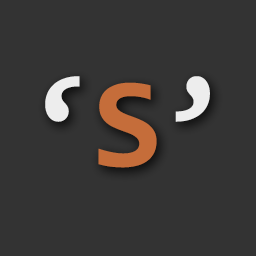
<style>
.page{position:relative;width:256px;height:256px;background:#333333}
.page>*{position:absolute;margin:0}
.t1{font:128px "Consolas-Bold";color:#ededed}
.t2{font:128px "Consolas-Bold";color:#c56d3a}
</style>
<div class="page">
<p class="t1" style="left:45px;top:76px;width:165px;height:92px">‘<span class="t2">S</span>’</p>
</div>
